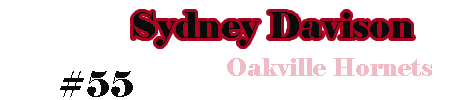
<style>
.page{position:relative;width:450px;height:100px;background:#ffffff}
.page>*{position:absolute;margin:0}
.t1{font:36px "Elephant-Regular";color:#0c0b0c}
.t2{font:24px "Elephant-Regular";color:#f0bbc5}
</style>
<div class="page">
<p class="t1" style="left:133px;top:12px;width:280px;height:34px">Sydney Davison</p>
<p class="t2" style="left:227px;top:58px;width:205px;height:18px">Oakville Hornets</p>
<p class="t1" style="left:60px;top:71px;width:73px;height:26px">#55</p>
</div>
